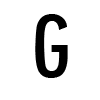
<style>
.page{position:relative;width:100px;height:100px;background:#ffffff}
.page>*{position:absolute;margin:0}
.t1{font:100px "TwCenMT-Condensed";color:#000000}
</style>
<div class="page">
<p class="t1" style="left:35px;top:14px;width:33px;height:64px">G</p>
</div>
